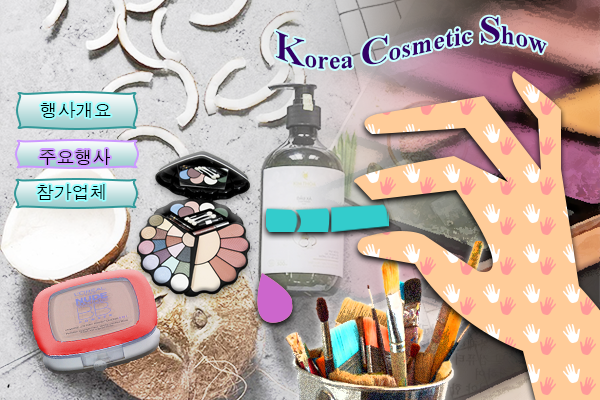
<style>
.page{position:relative;width:600px;height:400px}
.page>*{position:absolute;margin:0}
.t1{font:26.1px "TimesNewRomanPS-BoldMT";color:#330066}
.t2{font:39.2px "TimesNewRomanPS-BoldMT";color:#330066}
.t3{font:18px "Dotum";color:#000000}
</style>
<div class="page">
<p class="t1" style="left:275px;top:16px;width:272px;height:53px"><span class="t2">K</span>orea <span class="t2">C</span>osmetic <span class="t2">S</span>how</p>
<p class="t3" style="left:40px;top:102px;width:71px;height:16px">행사개요</p>
<p class="t3" style="left:39px;top:149px;width:71px;height:16px">주요행사</p>
<p class="t3" style="left:37px;top:184px;width:68px;height:16px">참가업체</p>
</div>
